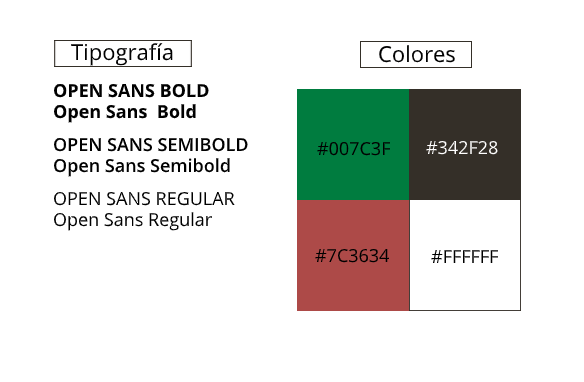
<style>
.page{position:relative;width:584px;height:382px;background:#ffffff}
.page>*{position:absolute;margin:0}
.t1{font:22px "OpenSans-Regular";color:#000000}
.t2{font:18px "OpenSans-Bold";color:#000000}
.t3{font:18px "OpenSans-SemiBold";color:#000000}
.t4{font:18px "OpenSans-Regular";color:#000000}
.t5{font:18px "OpenSans-Regular";color:#ffffff}
</style>
<div class="page">
<p class="t1" style="left:71px;top:43px;width:102px;height:23px">Tipografía</p>
<p class="t1" style="left:379px;top:45px;width:76px;height:18px">Colores</p>
<p class="t2" style="left:54px;top:83px;width:155px;height:15px">OPEN SANS BOLD</p>
<p class="t2" style="left:54px;top:104px;width:142px;height:19px">Open Sans  Bold</p>
<p class="t3" style="left:54px;top:137px;width:194px;height:15px">OPEN SANS SEMIBOLD</p>
<p class="t4" style="left:317px;top:141px;width:74px;height:15px">#007C3F</p>
<p class="t5" style="left:426px;top:140px;width:72px;height:15px">#342F28</p>
<p class="t3" style="left:54px;top:158px;width:176px;height:19px">Open Sans Semibold</p>
<p class="t4" style="left:54px;top:191px;width:181px;height:15px">OPEN SANS REGULAR</p>
<p class="t4" style="left:54px;top:212px;width:158px;height:19px">Open Sans Regular</p>
<p class="t4" style="left:315px;top:248px;width:75px;height:15px">#7C3634</p>
<p class="t4" style="left:431px;top:250px;width:68px;height:13px">#FFFFFF</p>
</div>
